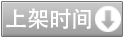
<style>
.page{position:relative;width:124px;height:38px;background:#ffffff}
.page>*{position:absolute;margin:0}
.t1{font:22px "AdobeHeitiStd-Regular";color:#ffffff}
</style>
<div class="page">
<p class="t1" style="left:6px;top:8px;width:85px;height:21px">上架时间</p>
</div>
